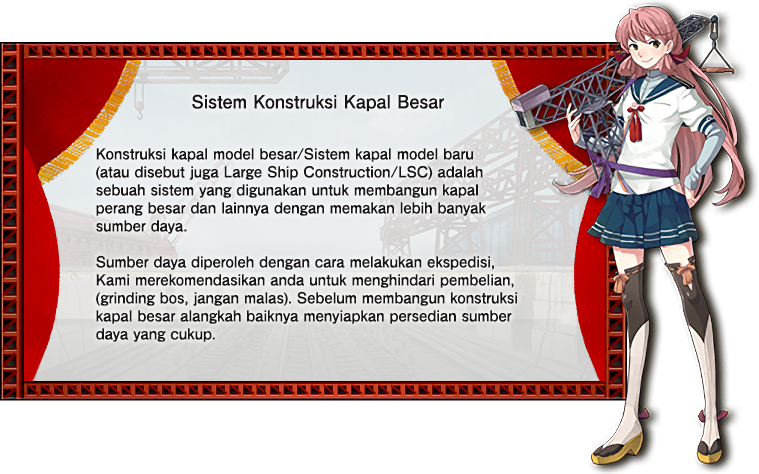
<style>
.page{position:relative;width:759px;height:474px;background:#ffffff}
.page>*{position:absolute;margin:0}
.t1{font:18px "FutoGoB101Pr5-Bold";color:#171616}
.t2{font:15px/18px "FutoGoB101Pr5-Bold";color:#171616}
</style>
<div class="page">
<p class="t1" style="left:192px;top:94px;width:252px;height:18px">Sistem Konstruksi Kapal Besar</p>
<p class="t2" style="left:96px;top:147px;width:421px;height:195px">Konstruksi kapal model besar/Sistem kapal model baru<br>(atau disebut juga Large Ship Construction/LSC) adalah<br>sebuah sistem yang digunakan untuk membangun kapal<br>perang besar dan lainnya dengan memakan lebih banyak<br>sumber daya.<br><br>Sumber daya diperoleh dengan cara melakukan ekspedisi,<br>Kami merekomendasikan anda untuk menghindari pembelian,<br>(grinding bos, jangan malas). Sebelum membangun konstruksi<br>kapal besar alangkah baiknya menyiapkan persedian sumber <br>daya yang cukup.</p>
</div>
